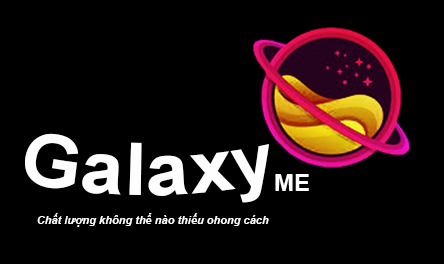
<style>
.page{position:relative;width:444px;height:264px;background:#000000}
.page>*{position:absolute;margin:0}
.t1{font:72px "Arial-BoldMT";color:#fefefe}
.t2{font:24px "Arial-BoldMT";color:#fefefe}
.t3{font:11px "Arial-BoldItalicMT";color:#ffffff}
</style>
<div class="page">
<p class="t1" style="left:24px;top:133px;width:245px;height:70px">Galaxy</p>
<p class="t2" style="left:275px;top:174px;width:34px;height:17px">ME</p>
<p class="t3" style="left:37px;top:213px;width:232px;height:14px">Chất lượng không thể nào thiếu ohong cách</p>
</div>
